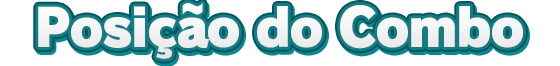
<style>
.page{position:relative;width:560px;height:66px;background:#ffffff}
.page>*{position:absolute;margin:0}
.t1{font:52px "RodinPro-UB";letter-spacing:-0.039em;color:#f2f3f3}
</style>
<div class="page">
<p class="t1" style="left:38px;top:3px;width:485px;height:56px">Posição do Combo</p>
</div>
